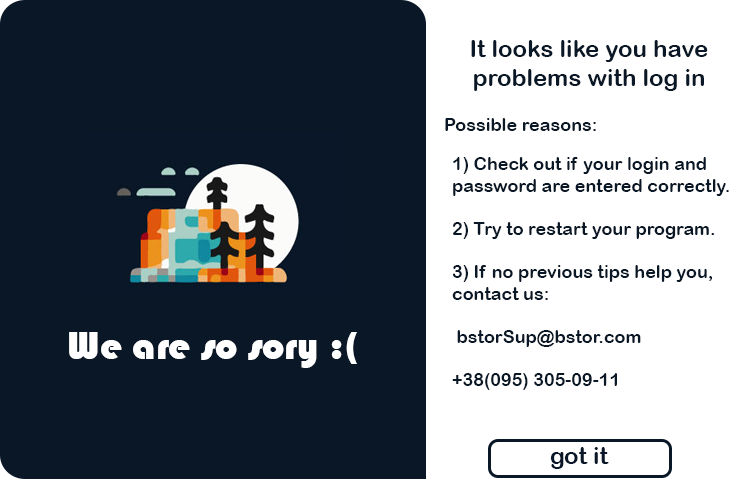
<style>
.page{position:relative;width:750px;height:500px;background:#091727}
.page>*{position:absolute;margin:0}
.t1{font:24px "ArialRoundedMTBold";color:#091727}
.t2{font:18px "ArialRoundedMTBold";color:#091727}
.t3{font:40px "Bauhaus93";color:#ffffff}
.t4{font:24px "ArialRoundedMTBold";color:#0a1728}
</style>
<div class="page">
<p class="t1" style="left:471px;top:40px;width:237px;height:51px;text-align:center">It looks like you have problems with log in</p>
<p class="t2" style="left:445px;top:118px;width:151px;height:13px">Possible reasons:</p>
<p class="t2" style="left:452px;top:157px;width:277px;height:233px">1) Check out if your login and password are entered correctly.<br><br>2) Try to restart your program.<br><br>3) If no previous tips help you,         contact us:<br><br> bstorSup@bstor.com<br><br>+38(095) 305-09-11</p>
<p class="t3" style="left:69px;top:332px;width:288px;height:36px">We are so sory :(</p>
<p class="t4" style="left:550px;top:447px;width:59px;height:22px">got it</p>
</div>
